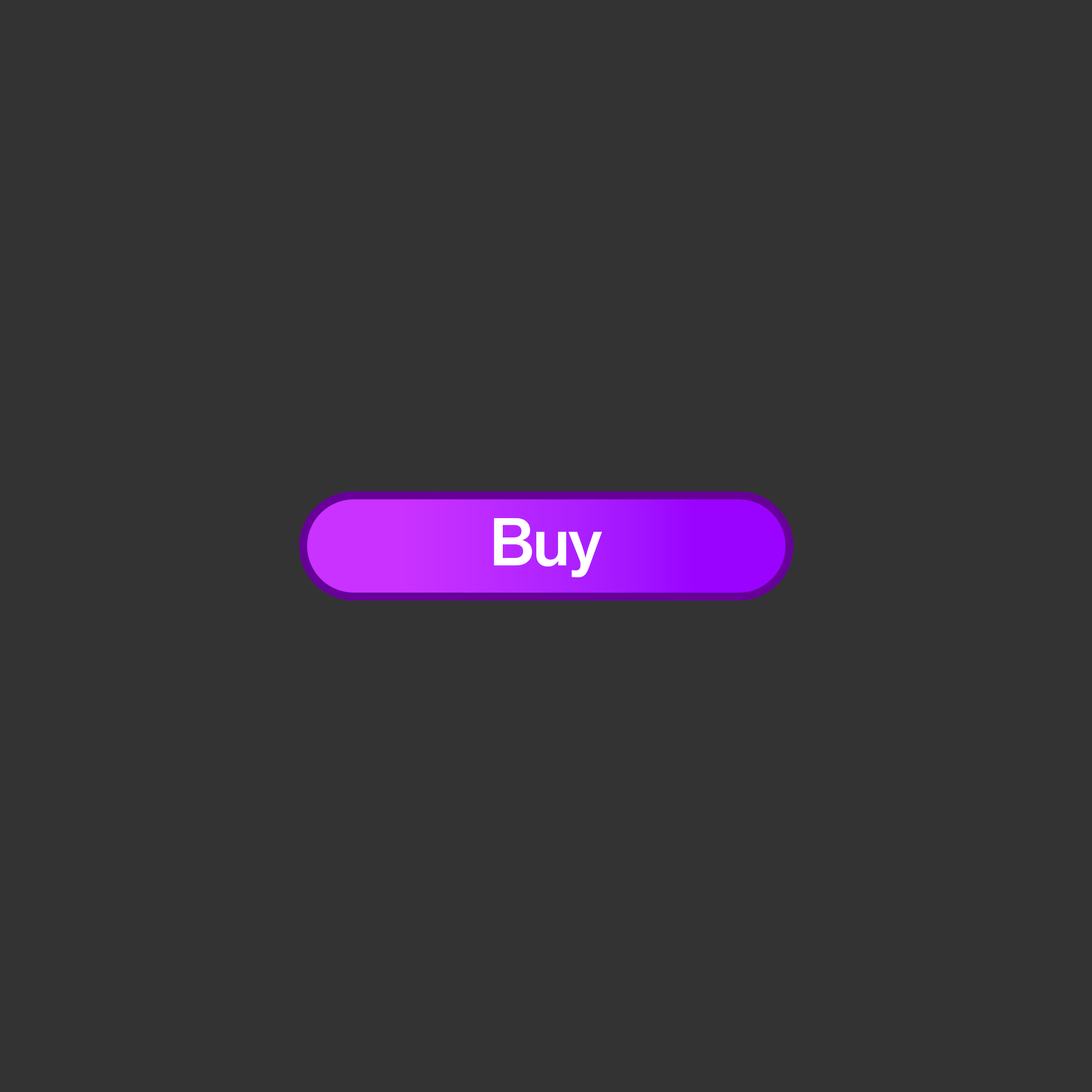
<style>
.page{position:relative;width:1092px;height:1092px;background:#333333}
.page>*{position:absolute;margin:0}
.t1{font:63.1px "NeueHaasGroteskText-Medium";letter-spacing:-0.017em;color:#ffffff}
</style>
<div class="page">
<p class="t1" style="left:494px;top:518px;width:108px;height:59px">Buy</p>
</div>
